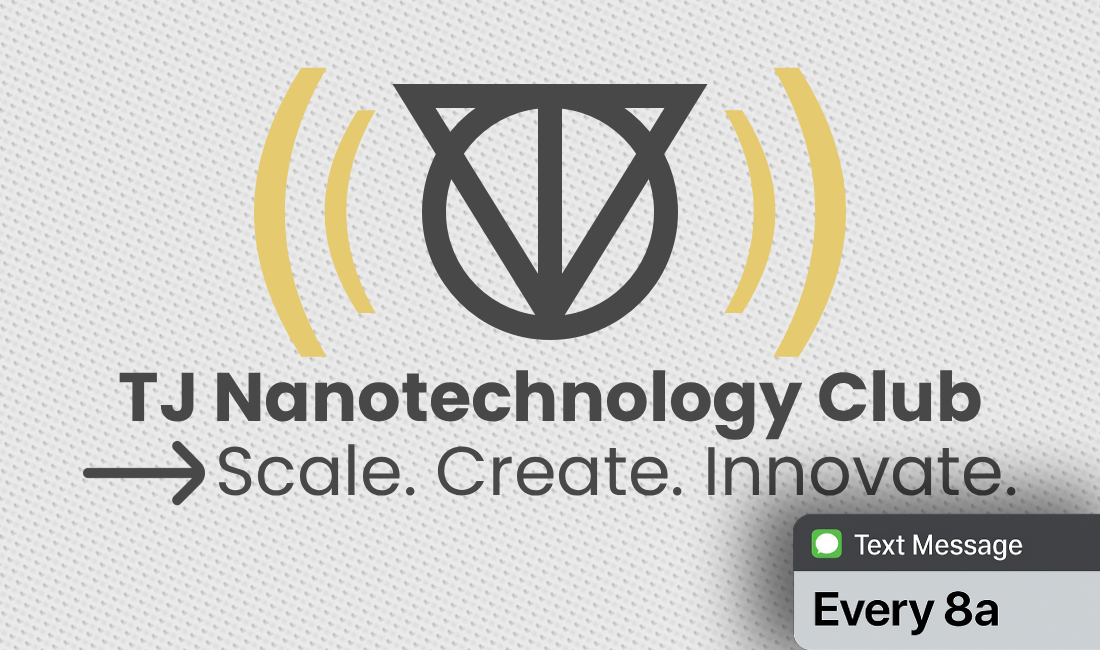
<style>
.page{position:relative;width:1100px;height:650px}
.page>*{position:absolute;margin:0}
.t1{font:68.6px "Poppins-Bold";color:#484848}
.t2{font:68.6px "Poppins-Regular";color:#484848}
</style>
<div class="page">
<p class="t1" style="left:119px;top:370px;width:862px;height:70px">TJ Nanotechnology Club</p>
<p class="t2" style="left:218px;top:444px;width:798px;height:52px">Scale. Create. Innovate.</p>
</div>
